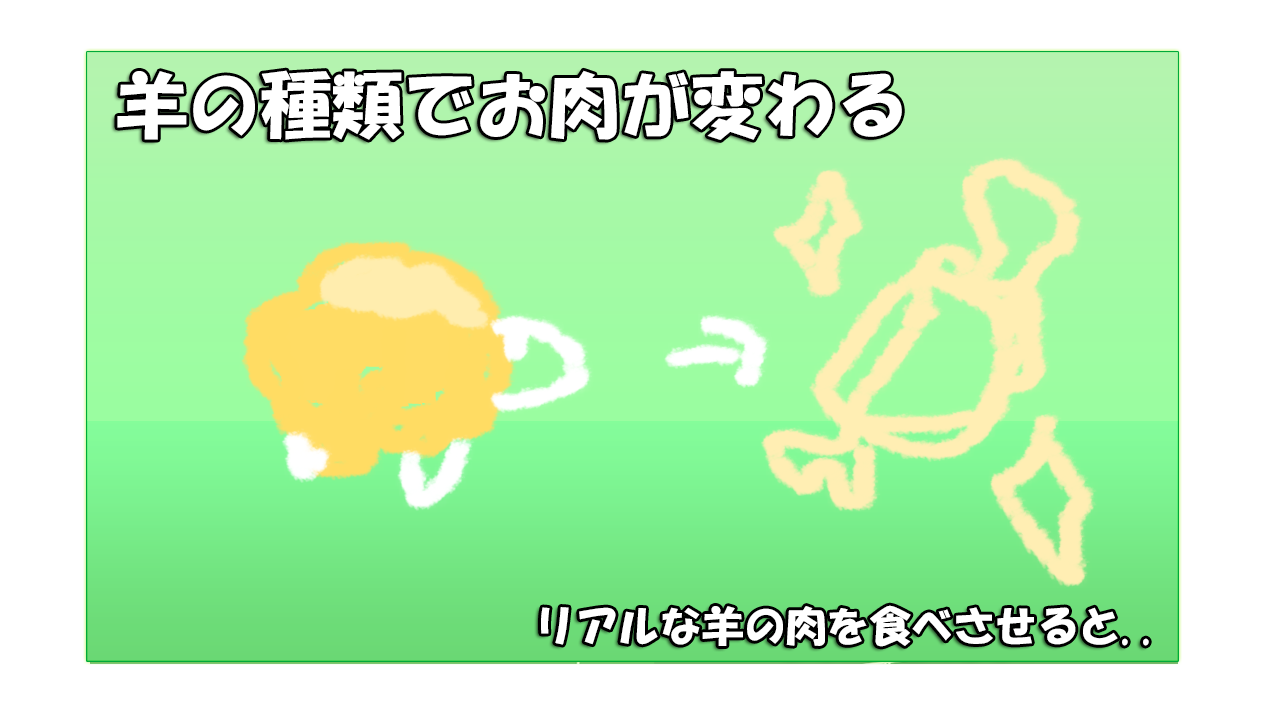
<style>
.page{position:relative;width:1280px;height:720px;background:#ffffff}
.page>*{position:absolute;margin:0}
.t1{font:72px "HGSoeiKakupoptai";color:#ffffff}
.t2{font:41.9px "HGSoeiKakupoptai";color:#ffffff}
</style>
<div class="page">
<p class="t1" style="left:117px;top:70px;width:785px;height:70px">羊の種類でお肉が変わる</p>
<p class="t2" style="left:541px;top:605px;width:608px;height:42px">リアルな羊の肉を食べさせると..</p>
</div>
